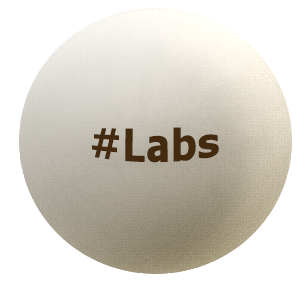
<style>
.page{position:relative;width:306px;height:290px;background:#ffffff}
.page>*{position:absolute;margin:0}
.t1{font:37.5px "Verdana-Bold";color:#442b10}
</style>
<div class="page">
<p class="t1" style="left:92px;top:127px;width:127px;height:36px">#Labs</p>
</div>
